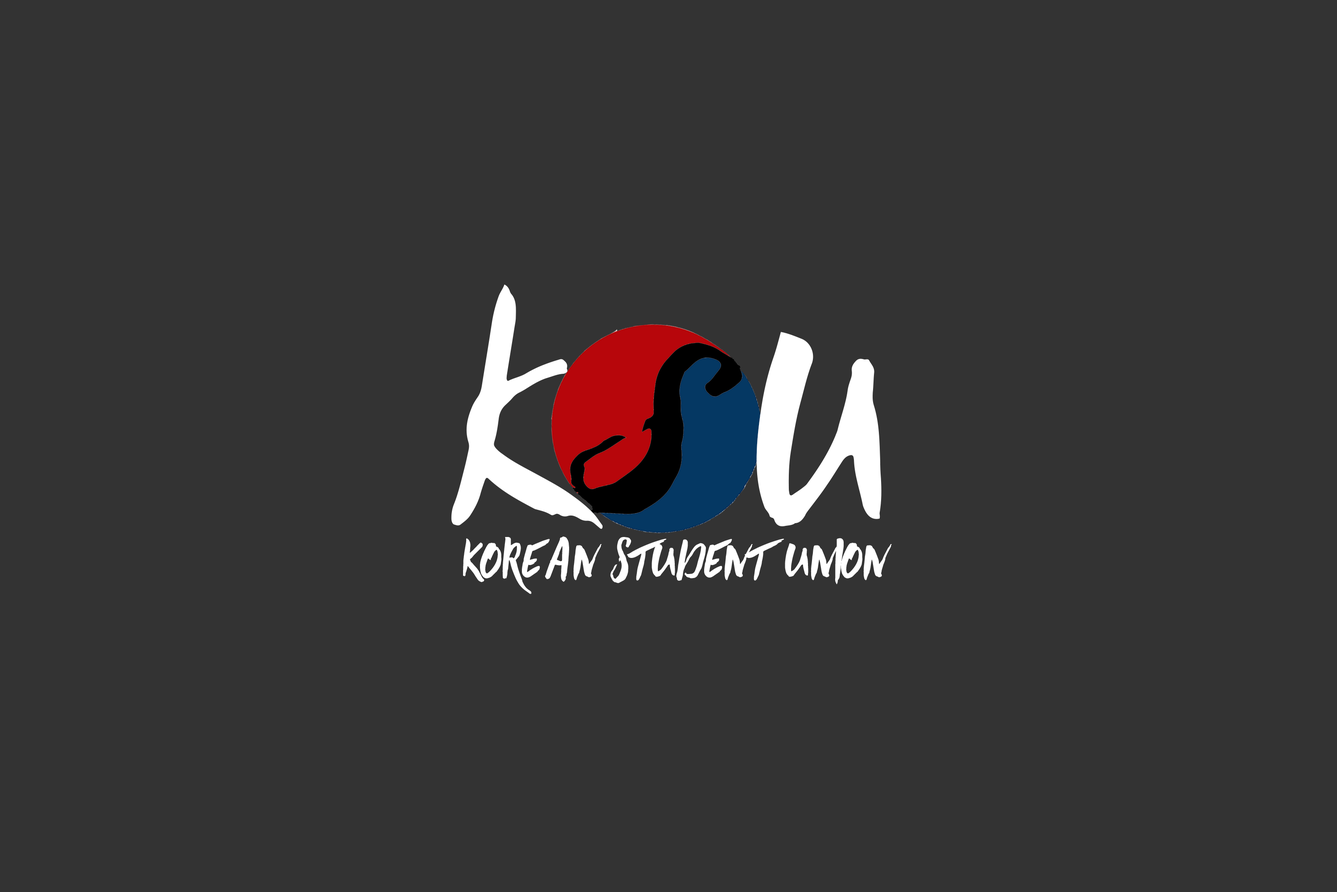
<style>
.page{position:relative;width:1337px;height:892px;background:#333333}
.page>*{position:absolute;margin:0}
.t1{font:257.7px "SummerHearts-Regular";color:#ffffff;scale:0.7 1}
.t2{font:266.2px "SummerHearts-Regular";color:#ffffff;scale:0.9 1}
.t3{font:45.8px "SummerHearts-Regular";color:#ffffff}
</style>
<div class="page">
<p class="t1" style="left:451px;top:284px;width:152px;height:245px">K</p>
<p class="t2" style="left:757px;top:332px;width:125px;height:194px">u</p>
<p class="t3" style="left:463px;top:536px;width:429px;height:58px">korean student union</p>
</div>
